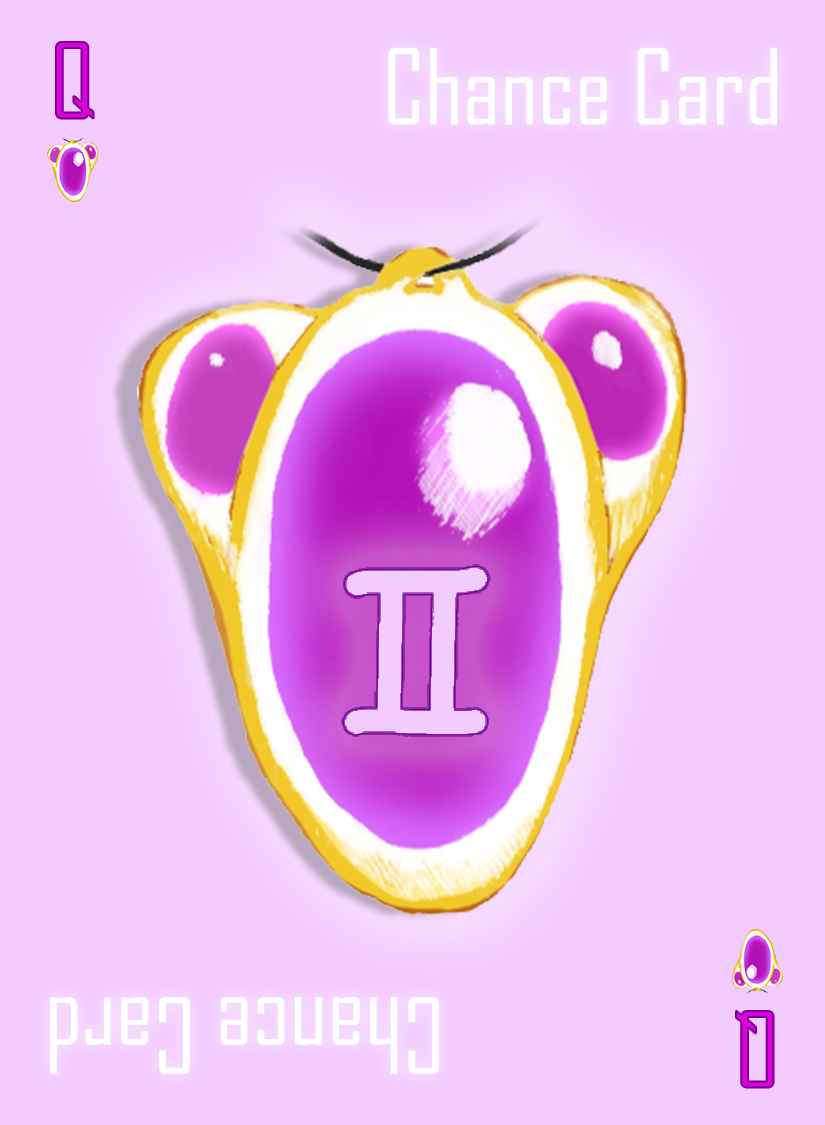
<style>
.page{position:relative;width:825px;height:1125px;background:#f2cbff}
.page>*{position:absolute;margin:0}
.t1{font:100px "AgencyFB-Reg";color:#de00d8}
.t2{font:100px "AgencyFB-Reg";color:#ffffff}
</style>
<div class="page">
<p class="t1" style="left:56px;top:42px;width:38px;height:77px">Q</p>
<p class="t2" style="left:388px;top:48px;width:389px;height:77px">Chance Card</p>
<p class="t2" style="left:50px;top:997px;width:389px;height:77px;rotate:180deg">Chance Card</p>
<p class="t1" style="left:736px;top:1011px;width:38px;height:77px;rotate:180deg">Q</p>
</div>
